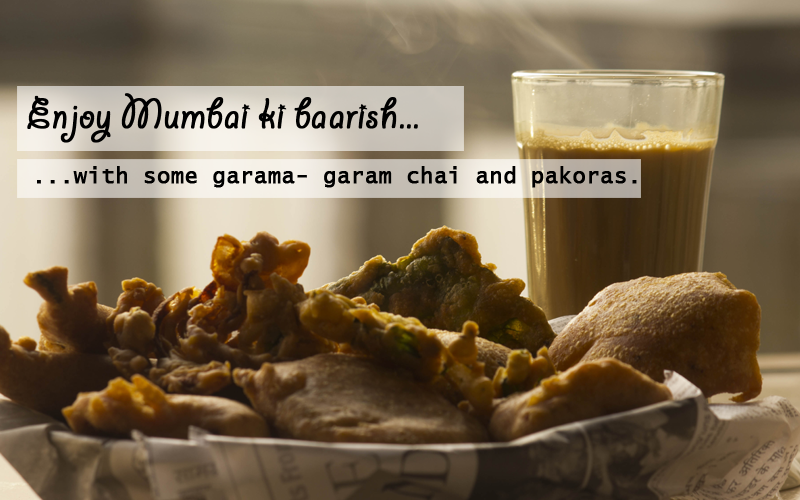
<style>
.page{position:relative;width:800px;height:500px}
.page>*{position:absolute;margin:0}
.t1{font:46px "GiddyupStd";color:#000000;font-weight:bold}
.t2{font:22px "LucidaConsole";color:#000000;font-weight:bold}
</style>
<div class="page">
<p class="t1" style="left:27px;top:93px;width:391px;height:50px">Enjoy Mumbai ki baarish...</p>
<p class="t2" style="left:37px;top:166px;width:600px;height:22px">...with some garama- garam chai and pakoras.</p>
</div>
